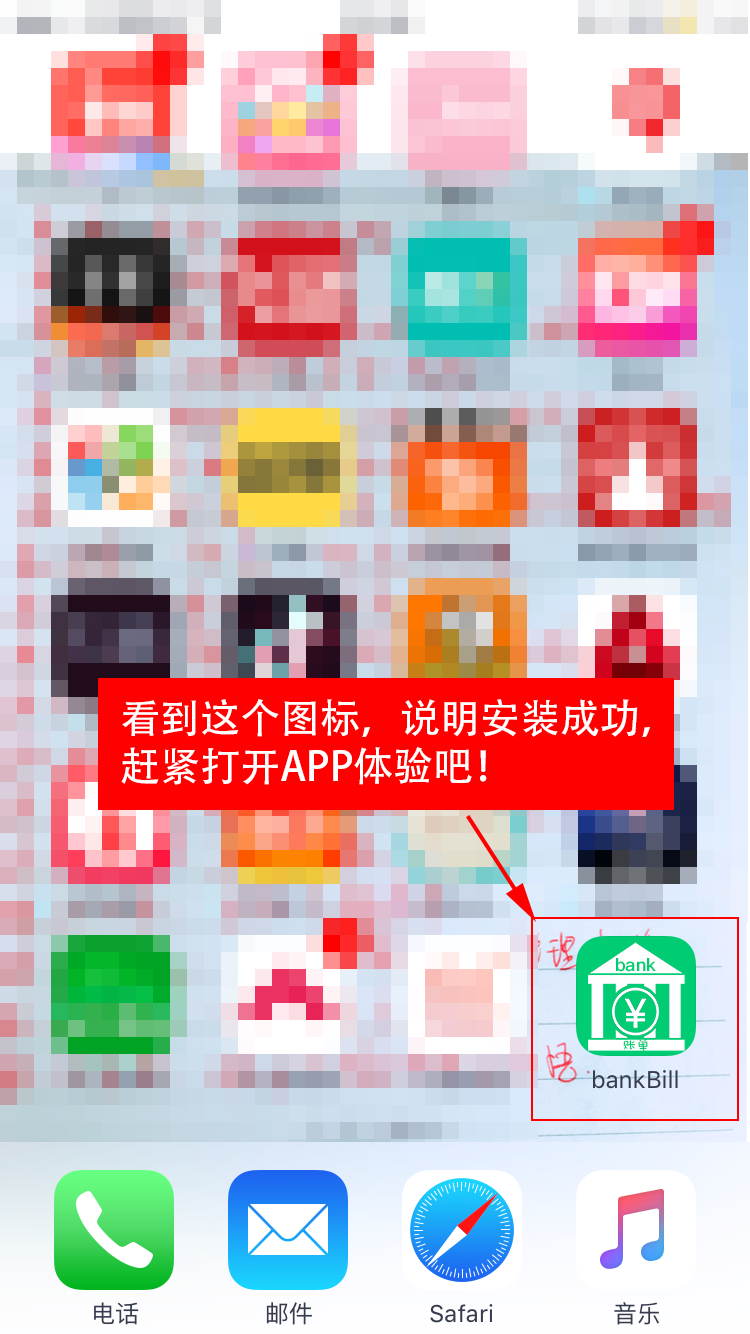
<style>
.page{position:relative;width:750px;height:1334px}
.page>*{position:absolute;margin:0}
.t1{font:40px/48px "AdobeHeitiStd-Regular";color:#ffffff}
</style>
<div class="page">
<p class="t1" style="left:121px;top:699px;width:529px;height:86px">看到这个图标，说明安装成功，<br>赶紧打开APP体验吧！</p>
</div>
